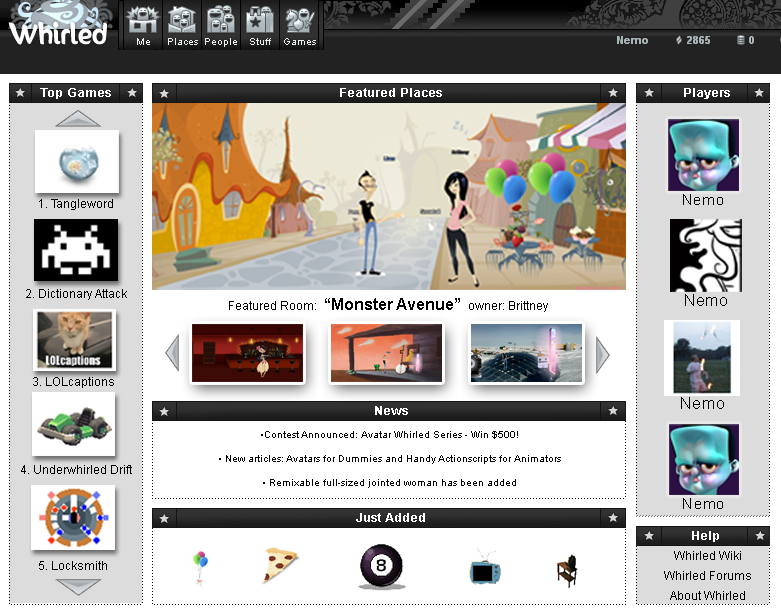
<style>
.page{position:relative;width:781px;height:616px;background:#ffffff}
.page>*{position:absolute;margin:0}
.t1{font:12px "Arial-BoldMT";color:#ffffff;scale:1.1 1}
.t2{font:15.3px "ArialMT";color:#000000}
.t3{font:12px "ArialMT";color:#000000}
.t4{font:15.6px "ArialMT";color:#000000}
.t5{font:16px "Arial-BoldMT";color:#000000}
.t6{font:16px "ArialMT";color:#000000}
.t7{font:10px "ArialMT";color:#000000}
.t8{font:15.1px "ArialMT";color:#000000}
.t9{font:12px/10px "ArialMT";color:#000000}
</style>
<div class="page">
<p class="t1" style="left:40px;top:88px;width:71px;height:11px">Top Games</p>
<p class="t1" style="left:340px;top:88px;width:102px;height:9px">Featured Places</p>
<p class="t1" style="left:684px;top:88px;width:46px;height:11px">Players</p>
<p class="t2" style="left:683px;top:194px;width:40px;height:11px">Nemo</p>
<p class="t3" style="left:39px;top:199px;width:74px;height:11px">1. Tangleword</p>
<p class="t3" style="left:26px;top:289px;width:101px;height:11px">2. Dictionary Attack</p>
<p class="t4" style="left:685px;top:294px;width:42px;height:12px">Nemo</p>
<p class="t5" style="left:229px;top:298px;width:319px;height:14px"><span class="t3">Featured Room:  </span>“Monster Avenue”  <span class="t3">owner: Brittney</span></p>
<p class="t3" style="left:33px;top:377px;width:81px;height:11px">3. LOLcaptions</p>
<p class="t6" style="left:681px;top:397px;width:43px;height:12px">Nemo</p>
<p class="t1" style="left:375px;top:406px;width:33px;height:9px">News</p>
<p class="t7" style="left:219px;top:431px;width:342px;height:57px;text-align:center">•Contest Announced: Avatar Whirled Series - Win $500!<br><br>• New articles: Avatars for Dummies and Handy Actionscripts for Animators <br><br>• Remixable full-sized jointed woman has been added</p>
<p class="t3" style="left:21px;top:465px;width:111px;height:9px">4. Underwhirled Drift</p>
<p class="t8" style="left:683px;top:498px;width:40px;height:11px">Nemo</p>
<p class="t1" style="left:356px;top:513px;width:69px;height:9px">Just Added</p>
<p class="t1" style="left:692px;top:531px;width:27px;height:11px">Help</p>
<p class="t9" style="left:664px;top:551px;width:87px;height:49px;text-align:center">Whirled Wiki<br><br>Whirled Forums<br><br>About Whirled</p>
<p class="t3" style="left:39px;top:561px;width:68px;height:9px">5. Locksmith</p>
</div>
